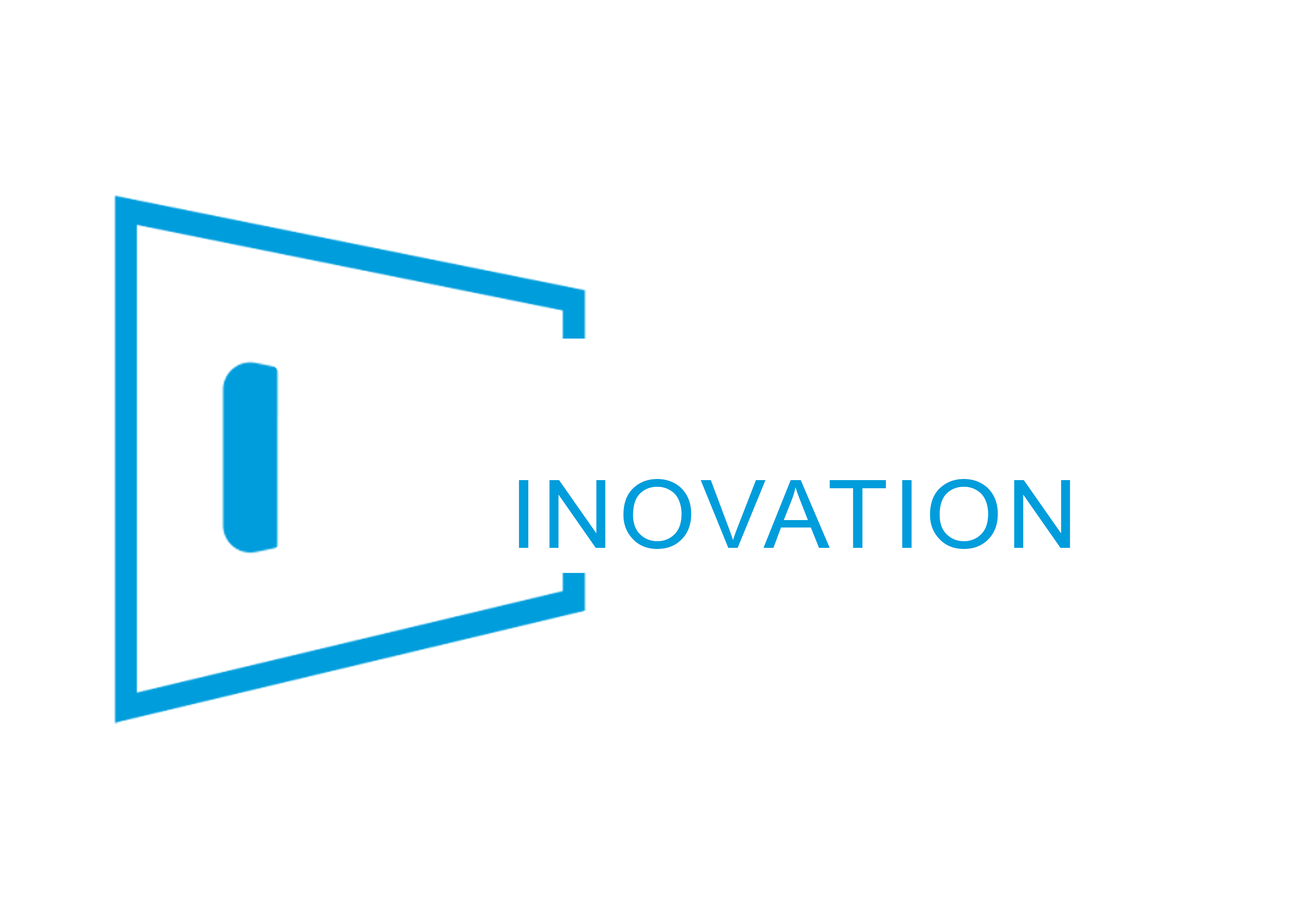
<style>
.page{position:relative;width:1299px;height:918px;background:#ffffff}
.page>*{position:absolute;margin:0}
.t1{font:112.4px/101.3px "Arial-BoldMT";color:#ffffff;font-weight:bold;scale:1.07 1}
.t2{font:94.4px/101.3px "ArialNarrow";letter-spacing:0.04em;color:#009ddc;scale:1.28 1}
</style>
<div class="page">
<p class="t1" style="left:517px;top:364px;width:737px;height:185px">LED VISUAL<br><span class="t2">INOVATION</span></p>
</div>
